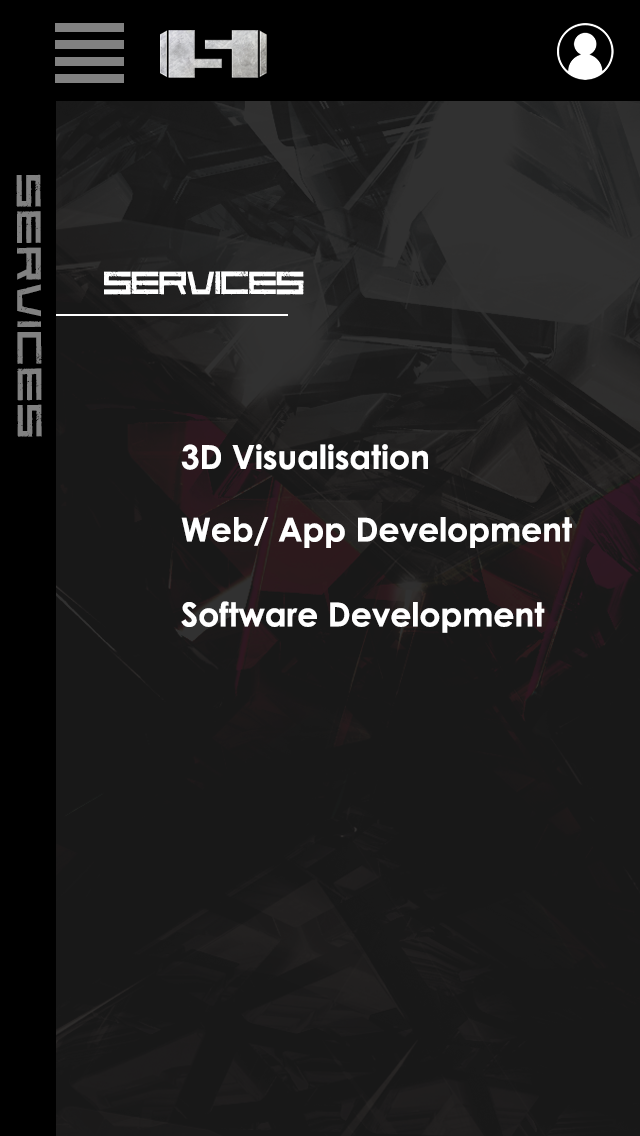
<style>
.page{position:relative;width:640px;height:1136px;background:#181818}
.page>*{position:absolute;margin:0}
.t1{font:42px "CodePredators-Regular";letter-spacing:0.075em;color:#818181;scale:1.13 1}
.t2{font:40px "CodePredators-Regular";color:#ffffff}
.t3{font:33px "CenturyGothic-Bold";color:#ffffff}
</style>
<div class="page">
<p class="t1" style="left:16px;top:174px;width:26px;height:263px;rotate:90deg">services</p>
<p class="t2" style="left:104px;top:271px;width:200px;height:24px">Services</p>
<p class="t3" style="left:181px;top:444px;width:247px;height:26px">3D Visualisation</p>
<p class="t3" style="left:181px;top:517px;width:391px;height:31px">Web/ App Development</p>
<p class="t3" style="left:181px;top:601px;width:364px;height:32px">Software Development</p>
</div>
